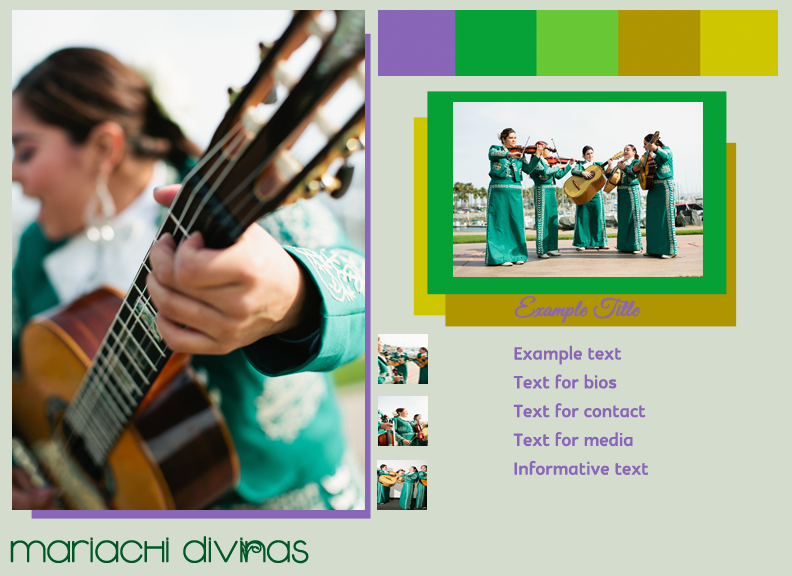
<style>
.page{position:relative;width:792px;height:576px;background:#d4dccd}
.page>*{position:absolute;margin:0}
.t1{font:24px "GreatVibes-Regular";color:#8966b7;font-weight:bold}
.t2{font:24px "Glametrix";color:#8966b7;font-weight:bold}
.t3{font:40px "NewGardenLight";color:#005826;font-weight:bold}
</style>
<div class="page">
<p class="t1" style="left:514px;top:296px;width:126px;height:27px">Example Title</p>
<p class="t2" style="left:513px;top:345px;width:135px;height:130px">Example text<br>Text for bios<br>Text for contact<br>Text for media <br>Informative text</p>
<p class="t3" style="left:10px;top:536px;width:299px;height:28px">Mariachi Divinas</p>
</div>
